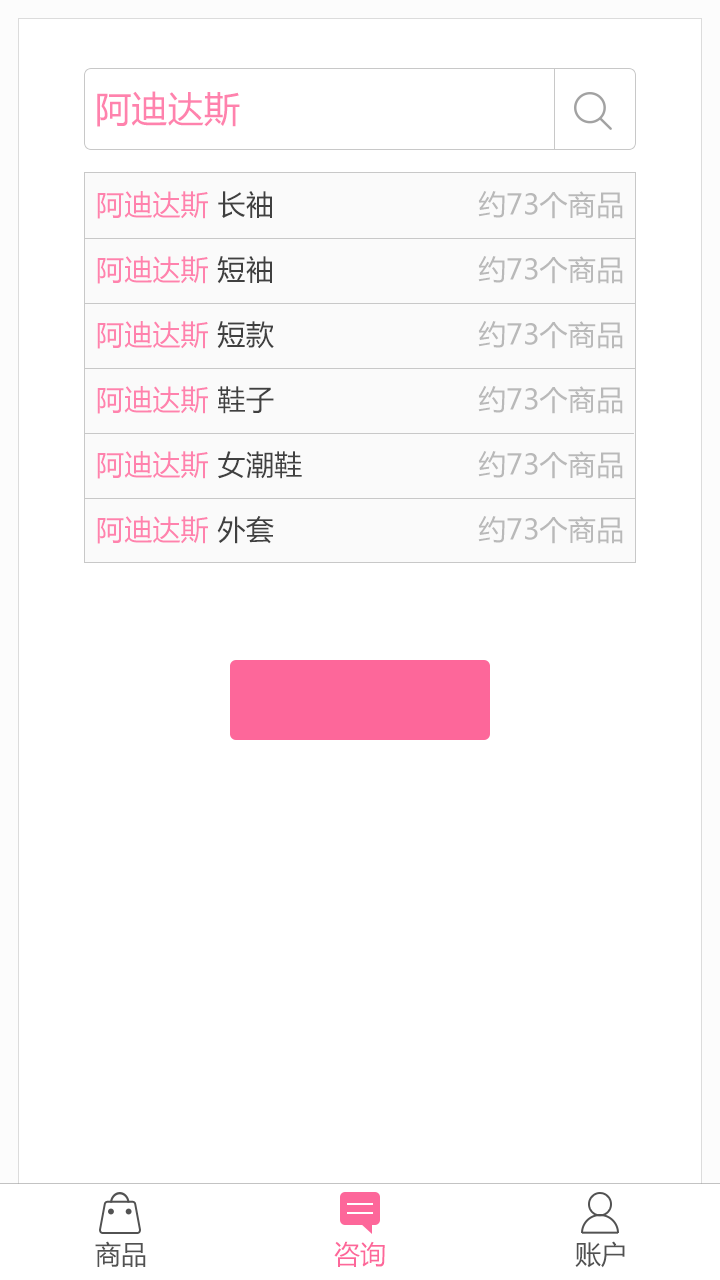
<style>
.page{position:relative;width:720px;height:1280px;background:#ffffff}
.page>*{position:absolute;margin:0}
.t1{font:36px "MicrosoftYaHei";letter-spacing:0.01em;color:#ff82ad}
.t2{font:28px "MicrosoftYaHei";letter-spacing:0.01em;color:#ff82ad}
.t3{font:28px "MicrosoftYaHei";letter-spacing:0.01em;color:#404040}
.t4{font:28px "MicrosoftYaHei";letter-spacing:0.01em;color:#b9b9b9}
.t5{font:26px "MicrosoftYaHei";color:#525252}
.t6{font:26px "MicrosoftYaHei";color:#fd679a}
</style>
<div class="page">
<p class="t1" style="left:97px;top:91px;width:143px;height:36px">阿迪达斯</p>
<p class="t2" style="left:97px;top:191px;width:175px;height:28px">阿迪达斯 <span class="t3">长袖</span></p>
<p class="t4" style="left:478px;top:191px;width:145px;height:28px">约73个商品</p>
<p class="t2" style="left:97px;top:256px;width:175px;height:28px">阿迪达斯 <span class="t3">短袖</span></p>
<p class="t4" style="left:478px;top:256px;width:145px;height:28px">约73个商品</p>
<p class="t2" style="left:97px;top:321px;width:177px;height:28px">阿迪达斯 <span class="t3">短款</span></p>
<p class="t4" style="left:478px;top:321px;width:145px;height:28px">约73个商品</p>
<p class="t2" style="left:97px;top:386px;width:177px;height:28px">阿迪达斯 <span class="t3">鞋子</span></p>
<p class="t4" style="left:478px;top:386px;width:145px;height:28px">约73个商品</p>
<p class="t2" style="left:97px;top:451px;width:205px;height:28px">阿迪达斯 <span class="t3">女潮鞋</span></p>
<p class="t4" style="left:478px;top:451px;width:145px;height:28px">约73个商品</p>
<p class="t2" style="left:97px;top:516px;width:177px;height:28px">阿迪达斯 <span class="t3">外套</span></p>
<p class="t4" style="left:478px;top:516px;width:145px;height:28px">约73个商品</p>
<p class="t5" style="left:95px;top:1241px;width:51px;height:26px">商品</p>
<p class="t6" style="left:334px;top:1241px;width:51px;height:26px">咨询</p>
<p class="t5" style="left:575px;top:1241px;width:50px;height:27px">账户</p>
</div>
